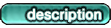
<style>
.page{position:relative;width:111px;height:28px;background:#ffffff}
.page>*{position:absolute;margin:0}
.t1{font:14px "FutoGoB101Pr5-Bold";color:#fffffa;font-weight:bold}
</style>
<div class="page">
<p class="t1" style="left:27px;top:8px;width:74px;height:14px">description</p>
</div>
